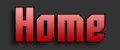
<style>
.page{position:relative;width:120px;height:50px;background:#333333}
.page>*{position:absolute;margin:0}
.t1{font:47.9px "Whitestone-Bold"}
</style>
<div class="page">
<p class="t1" style="left:15px;top:7px;width:90px;height:35px">Home</p>
</div>
